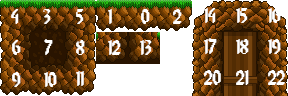
<style>
.page{position:relative;width:288px;height:96px;background:#ffffff}
.page>*{position:absolute;margin:0}
.t1{font:17.3px "8-bitLimitR(BRK)";color:#ffffff}
</style>
<div class="page">
<p class="t1" style="left:11px;top:9px;width:8px;height:15px">4</p>
<p class="t1" style="left:43px;top:9px;width:8px;height:15px">3</p>
<p class="t1" style="left:76px;top:9px;width:8px;height:15px">5</p>
<p class="t1" style="left:108px;top:9px;width:4px;height:15px">1</p>
<p class="t1" style="left:141px;top:9px;width:9px;height:15px">0</p>
<p class="t1" style="left:173px;top:9px;width:9px;height:15px">2</p>
<p class="t1" style="left:204px;top:8px;width:12px;height:15px">14</p>
<p class="t1" style="left:236px;top:8px;width:12px;height:15px">15</p>
<p class="t1" style="left:268px;top:8px;width:13px;height:15px">16</p>
<p class="t1" style="left:12px;top:40px;width:9px;height:15px">6</p>
<p class="t1" style="left:44px;top:39px;width:9px;height:16px">7</p>
<p class="t1" style="left:76px;top:40px;width:9px;height:15px">8</p>
<p class="t1" style="left:108px;top:40px;width:13px;height:15px">12</p>
<p class="t1" style="left:140px;top:40px;width:12px;height:15px">13</p>
<p class="t1" style="left:204px;top:38px;width:13px;height:16px">17</p>
<p class="t1" style="left:236px;top:39px;width:13px;height:15px">18</p>
<p class="t1" style="left:268px;top:39px;width:13px;height:15px">19</p>
<p class="t1" style="left:12px;top:72px;width:9px;height:15px">9</p>
<p class="t1" style="left:44px;top:72px;width:13px;height:15px">10</p>
<p class="t1" style="left:76px;top:71px;width:8px;height:15px">11</p>
<p class="t1" style="left:204px;top:70px;width:17px;height:15px">20</p>
<p class="t1" style="left:236px;top:70px;width:13px;height:15px">21</p>
<p class="t1" style="left:268px;top:70px;width:17px;height:15px">22</p>
</div>
